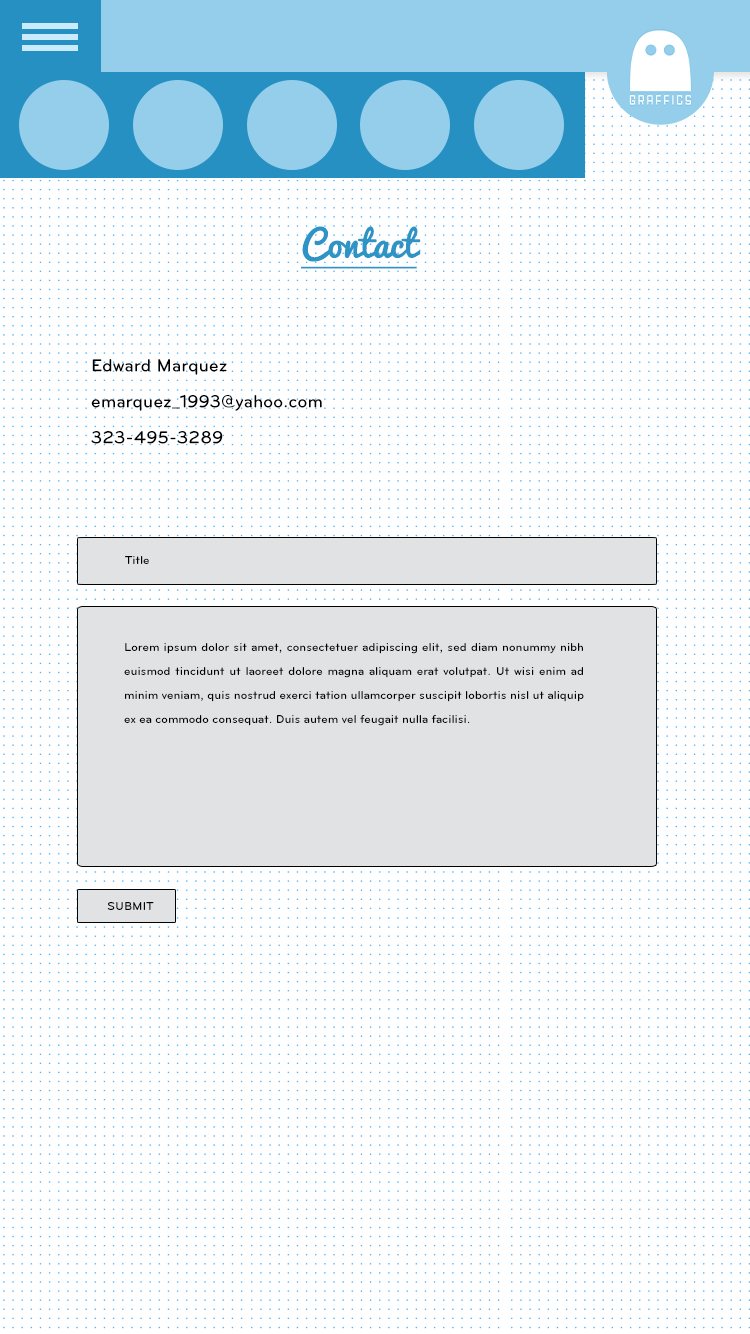
<style>
.page{position:relative;width:750px;height:1334px;background:#ffffff}
.page>*{position:absolute;margin:0}
.t1{font:36px "Pacifico";color:#2d94c5;text-decoration:underline}
.t2{font:18px/36px "Bryant-Medium";color:#000000}
.t3{font:12px "Bryant-Medium";color:#000000}
.t4{font:12px/24px "Bryant-Medium";color:#000000}
</style>
<div class="page">
<p class="t1" style="left:301px;top:226px;width:120px;height:43px">Contact</p>
<p class="t2" style="left:91px;top:359px;width:231px;height:85px;text-align:justify">Edward Marquez<br>emarquez_1993@yahoo.com<br>323-495-3289</p>
<p class="t3" style="left:125px;top:556px;width:24px;height:8px">Title</p>
<p class="t4" style="left:124px;top:643px;width:460px;height:83px;text-align:justify">Lorem ipsum dolor sit amet, consectetuer adipiscing elit, sed diam nonummy nibh euismod tincidunt ut laoreet dolore magna aliquam erat volutpat. Ut wisi enim ad minim veniam, quis nostrud exerci tation ullamcorper suscipit lobortis nisl ut aliquip ex ea commodo consequat. Duis autem vel feugait nulla facilisi.</p>
<p class="t3" style="left:107px;top:902px;width:47px;height:8px">SUBMIT</p>
</div>
